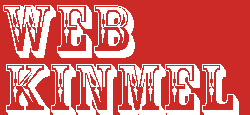
<style>
.page{position:relative;width:250px;height:115px;background:#cc2a27}
.page>*{position:absolute;margin:0}
.t1{font:70.8px "RosewoodStd-Regular";color:#ffffff}
</style>
<div class="page">
<p class="t1" style="left:3px;top:5px;width:132px;height:53px">WEB</p>
<p class="t1" style="left:6px;top:64px;width:233px;height:53px">Kinmel</p>
</div>
